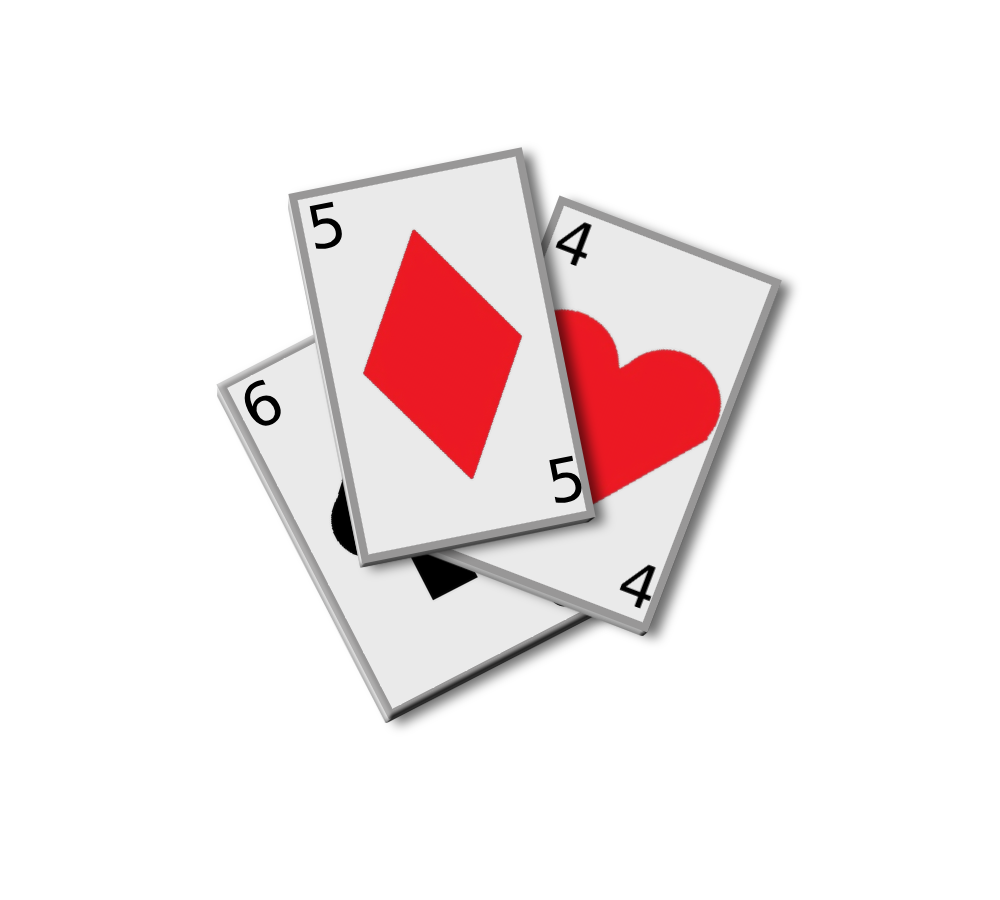
<style>
.page{position:relative;width:1000px;height:900px;background:#ffffff}
.page>*{position:absolute;margin:0}
.t1{font:60px "DejaVuSans";color:#000000}
</style>
<div class="page">
<p class="t1" style="left:309px;top:201px;width:34px;height:48px;rotate:-11deg">5</p>
<p class="t1" style="left:244px;top:379px;width:37px;height:47px;rotate:-27deg">6</p>
<p class="t1" style="left:549px;top:455px;width:34px;height:48px;rotate:-11deg">5</p>
</div>
